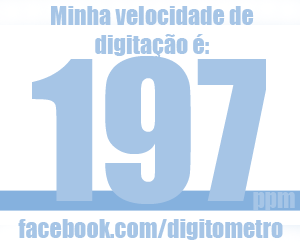
<style>
.page{position:relative;width:300px;height:250px;background:#ffffff}
.page>*{position:absolute;margin:0}
.t1{font:24px "Impact";color:#a6c5e6}
.t2{font:180px "Impact";color:#a6c5e6}
</style>
<div class="page">
<p class="t1" style="left:51px;top:6px;width:203px;height:52px;text-align:center">Minha velocidade de<br>digitação é:</p>
<p class="t2" style="left:32px;top:56px;width:234px;height:148px">197</p>
<p class="t1" style="left:253px;top:192px;width:42px;height:18px">ppm</p>
<p class="t1" style="left:18px;top:219px;width:265px;height:21px">facebook.com/digitometro</p>
</div>
